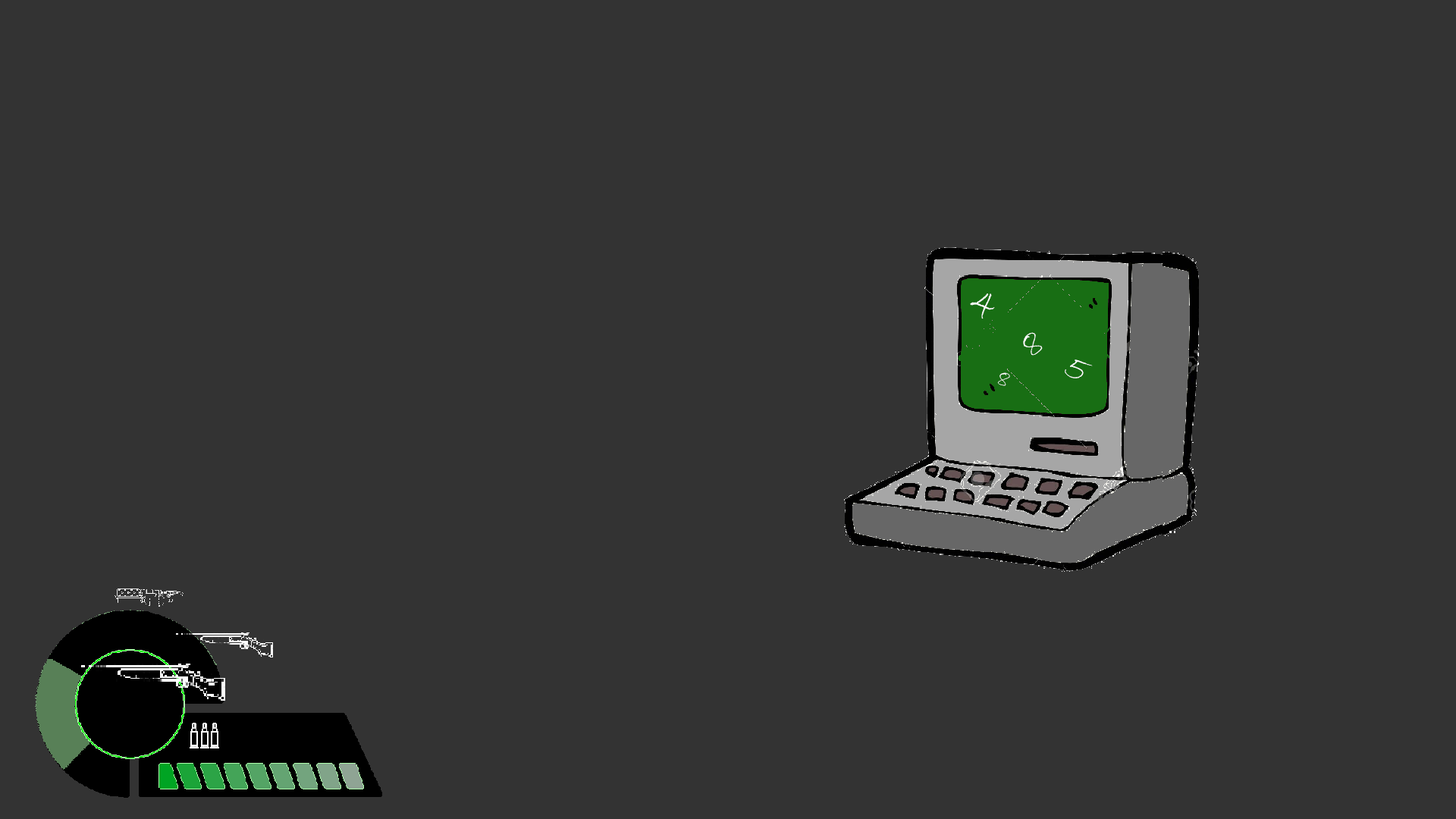
<style>
.page{position:relative;width:1456px;height:819px;background:#333333}
.page>*{position:absolute;margin:0}
.t1{font:45.5px "BradleyHandITC";letter-spacing:0.1em;color:#ffffff}
.t2{font:36.4px "BradleyHandITC";letter-spacing:0.1em;color:#ffffff}
.t3{font:22.7px "BradleyHandITC";letter-spacing:0.1em;color:#ffffff}
</style>
<div class="page">
<p class="t1" style="left:970px;top:293px;width:25px;height:26px;rotate:13deg">4</p>
<p class="t2" style="left:1023px;top:332px;width:20px;height:24px;rotate:-41deg">8</p>
<p class="t2" style="left:1065px;top:359px;width:28px;height:19px;rotate:22deg">5</p>
<p class="t3" style="left:997px;top:372px;width:13px;height:14px;rotate:13deg">8</p>
</div>
